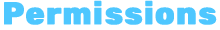
<style>
.page{position:relative;width:220px;height:30px;background:#ffffff}
.page>*{position:absolute;margin:0}
.t1{font:31.4px "Rubik-ExtraBold";letter-spacing:0.02em;color:#4ec7ff;font-weight:bold}
</style>
<div class="page">
<p class="t1" style="left:4px;top:0px;width:213px;height:25px">Permissions</p>
</div>
